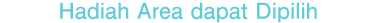
<style>
.page{position:relative;width:377px;height:23px;background:#ffffff}
.page>*{position:absolute;margin:0}
.t1{font:22px "FutoGoB101Pr5-Bold";color:#5fcdd9}
</style>
<div class="page">
<p class="t1" style="left:60px;top:2px;width:257px;height:21px">Hadiah Area dapat Dipilih</p>
</div>
